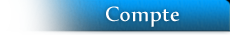
<style>
.page{position:relative;width:230px;height:35px}
.page>*{position:absolute;margin:0}
.t1{font:25px "Nyala-Regular";letter-spacing:0.025em;color:#ffffff}
</style>
<div class="page">
<p class="t1" style="left:106px;top:6px;width:74px;height:21px">Compte</p>
</div>
